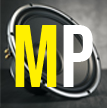
<style>
.page{position:relative;width:107px;height:108px}
.page>*{position:absolute;margin:0}
.t1{font:89px "BebasNeue-Regular";color:#fff000}
.t2{font:89px "BebasNeue-Regular";color:#ffffff}
</style>
<div class="page">
<p class="t1" style="left:15px;top:25px;width:78px;height:62px">M<span class="t2">P</span></p>
</div>
